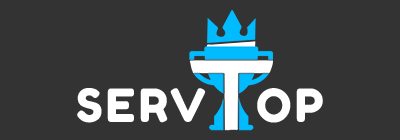
<style>
.page{position:relative;width:400px;height:140px;background:#333333}
.page>*{position:absolute;margin:0}
.t1{font:45.8px "FredokaOne-Regular";letter-spacing:0.08em;color:#ffffff}
</style>
<div class="page">
<p class="t1" style="left:77px;top:88px;width:246px;height:35px">SERV   OP</p>
</div>
